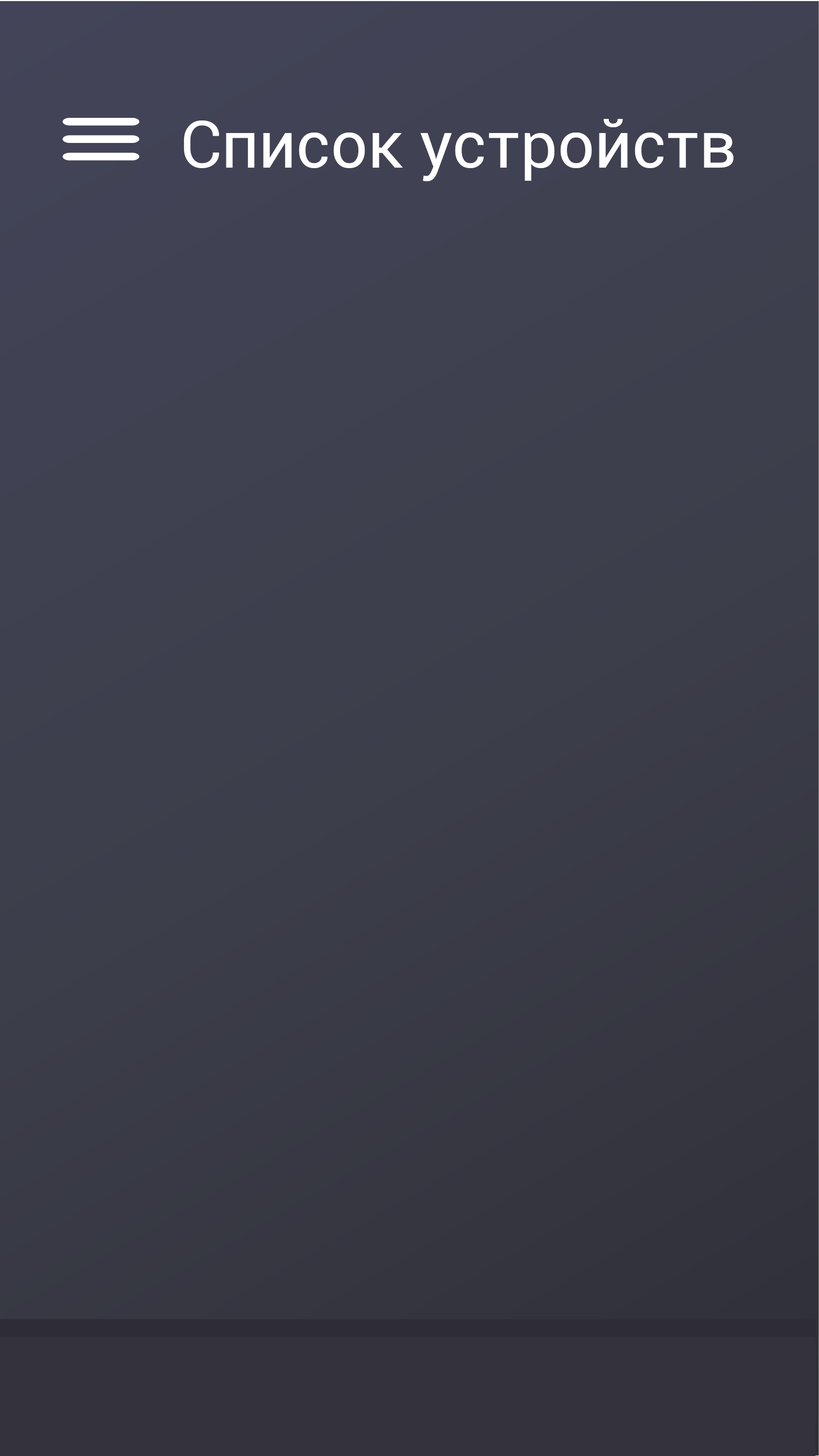
<style>
.page{position:relative;width:819px;height:1456px}
.page>*{position:absolute;margin:0}
.t1{font:65.5px "Roboto-Regular";color:#ffffff}
</style>
<div class="page">
<p class="t1" style="left:184px;top:119px;width:549px;height:62px">Список устройств</p>
</div>
